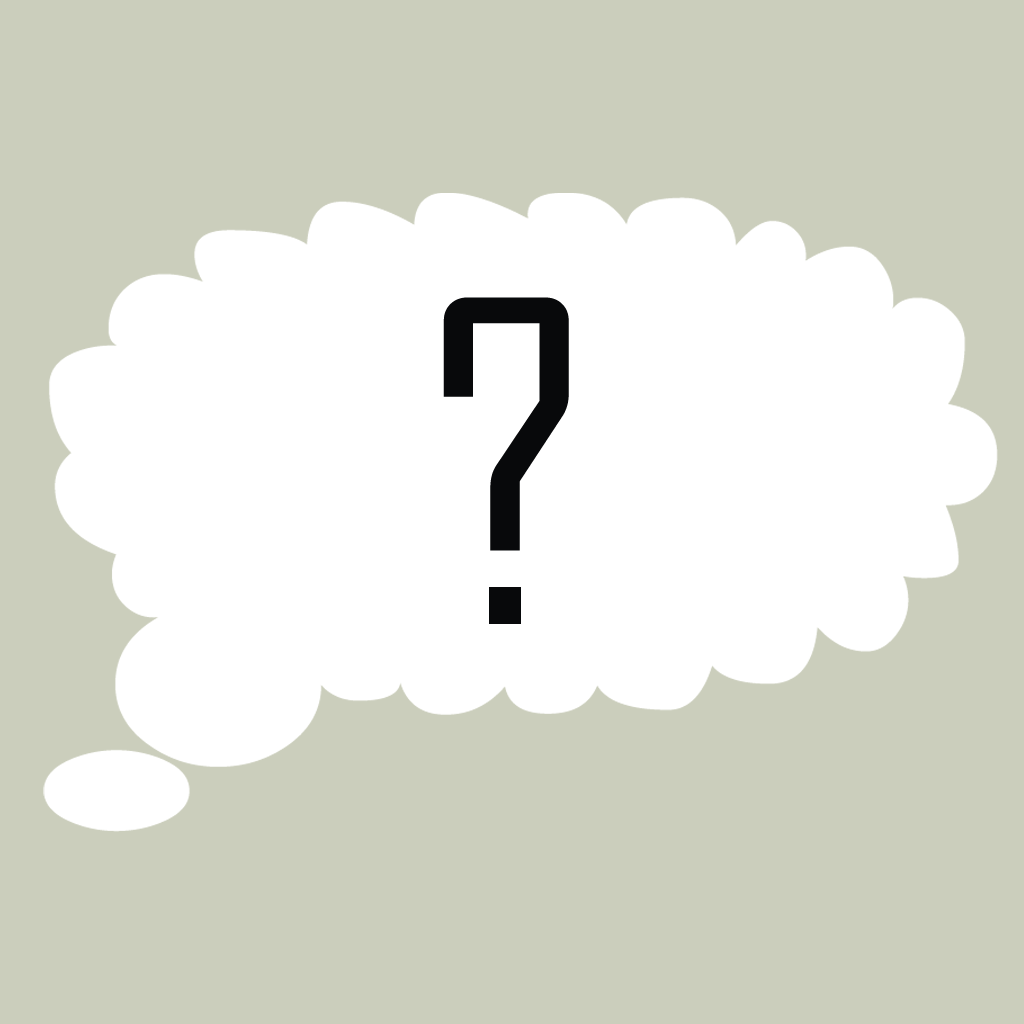
<style>
.page{position:relative;width:1024px;height:1024px;background:#cbcebc}
.page>*{position:absolute;margin:0}
.t1{font:426.8px "AgencyFB-Reg";color:#08090b}
</style>
<div class="page">
<p class="t1" style="left:443px;top:297px;width:126px;height:327px">?</p>
</div>
